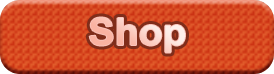
<style>
.page{position:relative;width:274px;height:74px}
.page>*{position:absolute;margin:0}
.t1{font:37.7px "Arial-BoldMT";scale:1.04 1}
</style>
<div class="page">
<p class="t1" style="left:89px;top:17px;width:96px;height:36px">Shop</p>
<p class="t1" style="left:89px;top:17px;width:96px;height:36px">Shop</p>
</div>
